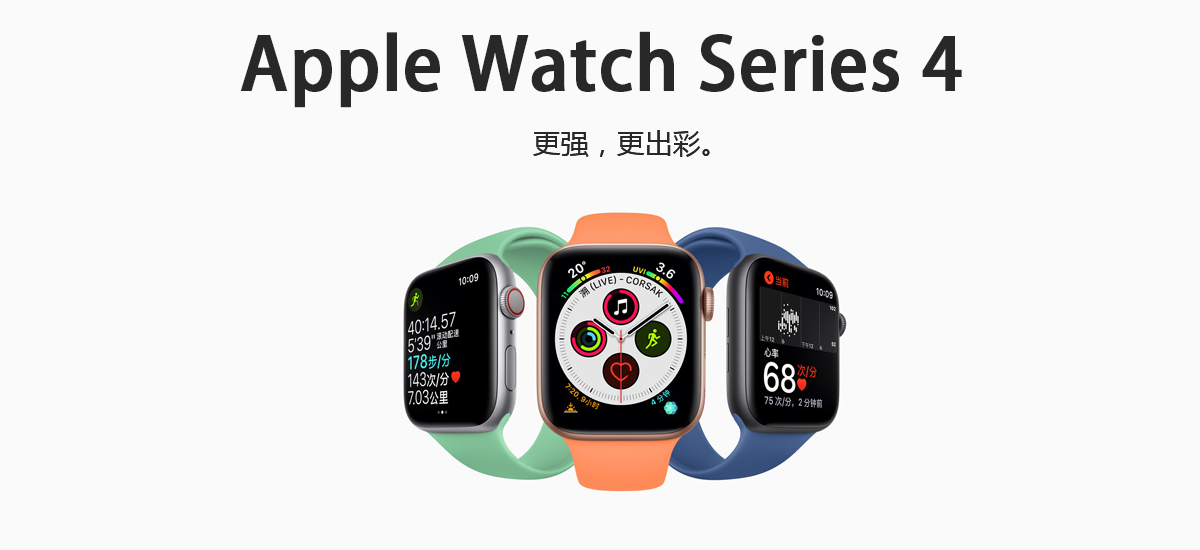
<style>
.page{position:relative;width:1200px;height:550px;background:#fafafa}
.page>*{position:absolute;margin:0}
.t1{font:72px "AdobeHeitiStd-Regular";color:#282828;font-weight:bold}
.t2{font:28px "MicrosoftYaHei";color:#282828}
</style>
<div class="page">
<p class="t1" style="left:241px;top:31px;width:721px;height:77px">Apple Watch Series 4</p>
<p class="t2" style="left:533px;top:130px;width:177px;height:27px">更强，更出彩。</p>
</div>
